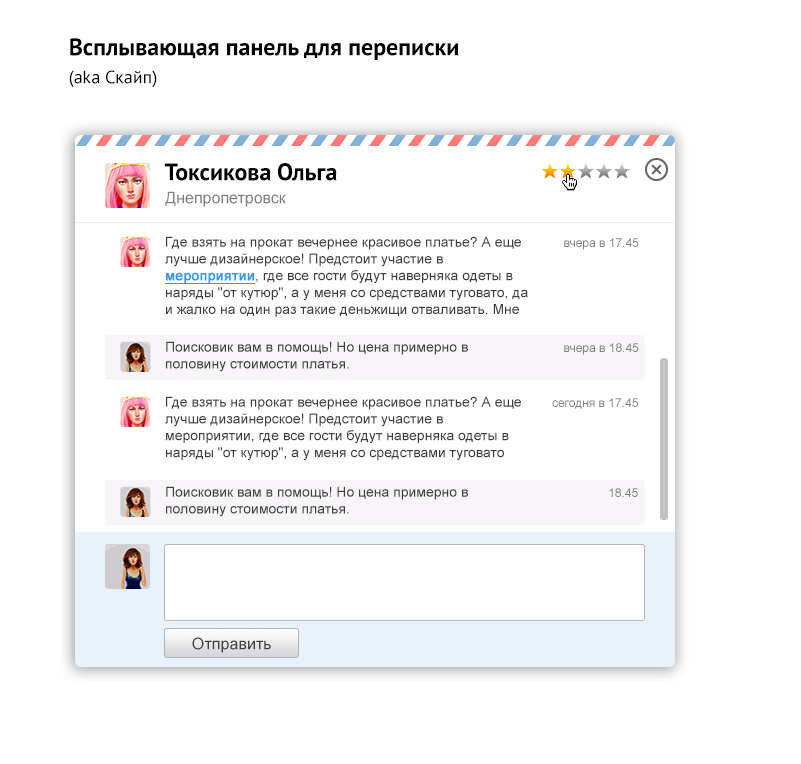
<style>
.page{position:relative;width:801px;height:764px;background:#ffffff}
.page>*{position:absolute;margin:0}
.t1{font:24px "PTSans-Bold";color:#000000}
.t2{font:18px "PTSans-Regular";color:#000000}
.t3{font:16px "ArialMT";color:#7f7f7f}
.t4{font:14px "ArialMT";color:#3e3e3e}
.t5{font:14px "ArialMT";color:#3399ff;font-weight:bold;text-decoration:underline}
.t6{font:12px "ArialMT";color:#7f7f7f}
.t7{font:16px "ArialMT";color:#3e3e3e}
</style>
<div class="page">
<p class="t1" style="left:70px;top:38px;width:388px;height:22px">Вcплывающая панель для переписки</p>
<p class="t2" style="left:69px;top:70px;width:88px;height:18px">(aka Скайп)</p>
<p class="t1" style="left:164px;top:163px;width:173px;height:18px">Токсикова Ольга</p>
<p class="t3" style="left:165px;top:191px;width:121px;height:16px">Днепропетровск</p>
<p class="t4" style="left:165px;top:236px;width:363px;height:81px">Где взять на прокат вечернее красивое платье? А еще лучше дизайнерское! Предстоит участие в <span class="t5">мероприятии</span>, где все гости будут наверняка одеты в наряды "от кутюр", а у меня со средствами туговато, да и жалко на один раз такие деньжищи отваливать. Мне бы салон найти, где на прокат можно такой наряд взять. Поделитесь, пожалуйста, советами.</p>
<p class="t6" style="left:564px;top:238px;width:75px;height:12px">вчера в 17.45</p>
<p class="t4" style="left:166px;top:341px;width:302px;height:31px">Поисковик вам в помощь! Но цена примерно в половину стоимости платья.</p>
<p class="t6" style="left:564px;top:343px;width:75px;height:12px">вчера в 18.45</p>
<p class="t4" style="left:165px;top:396px;width:356px;height:64px">Где взять на прокат вечернее красивое платье? А еще лучше дизайнерское! Предстоит участие в мероприятии, где все гости будут наверняка одеты в наряды "от кутюр", а у меня со средствами туговато</p>
<p class="t6" style="left:552px;top:398px;width:86px;height:11px">сегодня в 17.45</p>
<p class="t4" style="left:166px;top:486px;width:302px;height:31px">Поисковик вам в помощь! Но цена примерно в половину стоимости платья.</p>
<p class="t6" style="left:609px;top:488px;width:29px;height:9px">18.45</p>
<p class="t7" style="left:192px;top:637px;width:79px;height:16px">Отправить</p>
</div>
